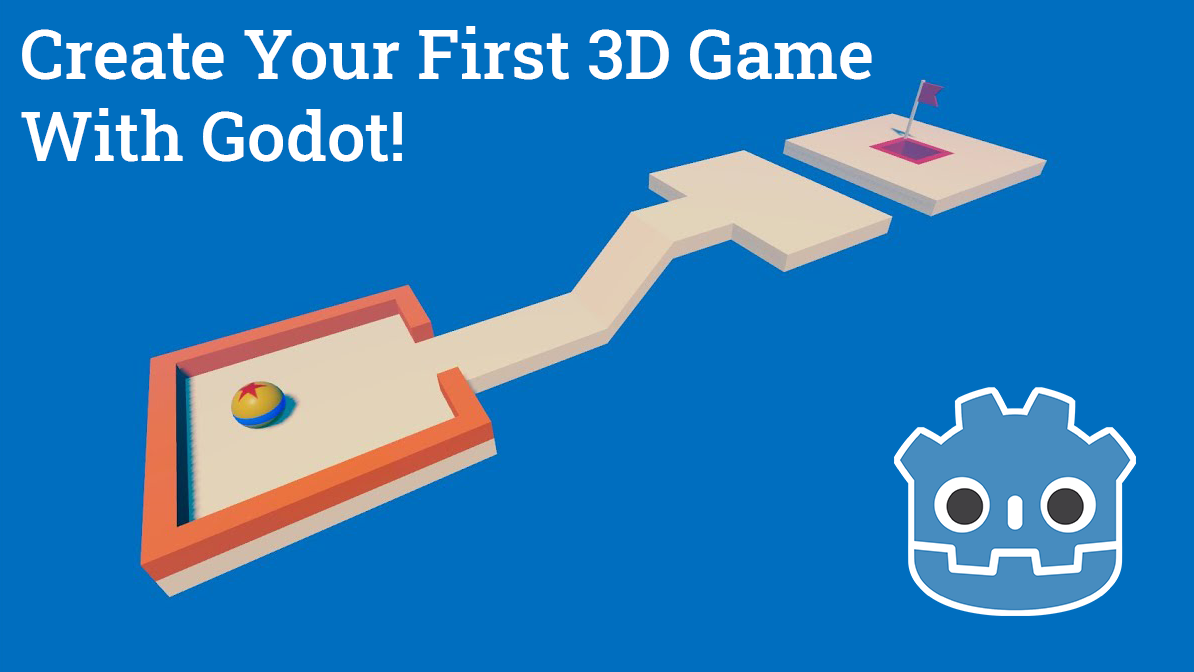
<style>
.page{position:relative;width:1194px;height:672px;background:#006ebf}
.page>*{position:absolute;margin:0}
.t1{font:68.8px "RobotoSlab-Medium";color:#ffffff}
</style>
<div class="page">
<p class="t1" style="left:21px;top:26px;width:851px;height:136px">Create Your First 3D Game<br>With Godot!</p>
</div>
